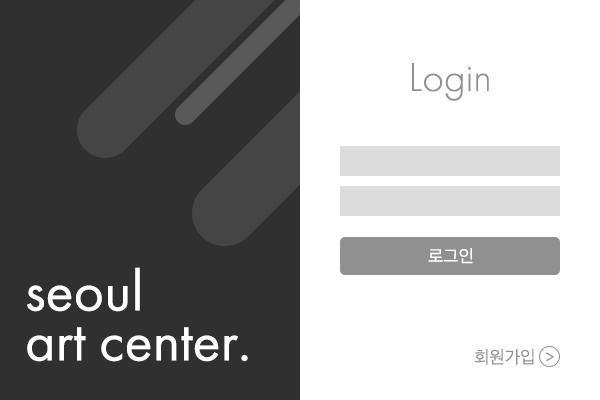
<style>
.page{position:relative;width:600px;height:400px;background:#ffffff}
.page>*{position:absolute;margin:0}
.t1{font:41.7px "FuturaPT-Light";color:#909090}
.t2{font:16.7px "SDGothicNeoa-dRg";color:#ffffff}
.t3{font:58.3px/50px "FuturaPT-Book";color:#ffffff}
.t4{font:16.7px "SDGothicNeoa-cLt";color:#909090}
</style>
<div class="page">
<p class="t1" style="left:412px;top:63px;width:77px;height:38px">Login</p>
<p class="t2" style="left:428px;top:248px;width:45px;height:16px">로그인</p>
<p class="t3" style="left:27px;top:267px;width:221px;height:95px">seoul<br>art center.</p>
<p class="t4" style="left:474px;top:349px;width:80px;height:16px">회원가입  &gt;</p>
</div>
